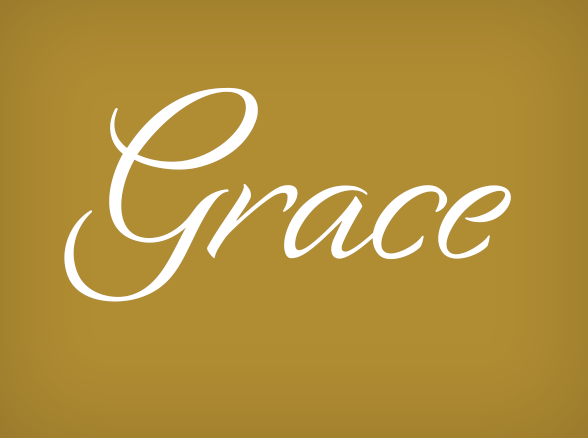
<style>
.page{position:relative;width:588px;height:438px;background:#b08c32}
.page>*{position:absolute;margin:0}
.t1{font:255px "Recherche";color:#ffffff}
</style>
<div class="page">
<p class="t1" style="left:64px;top:87px;width:447px;height:215px">Grace</p>
</div>
